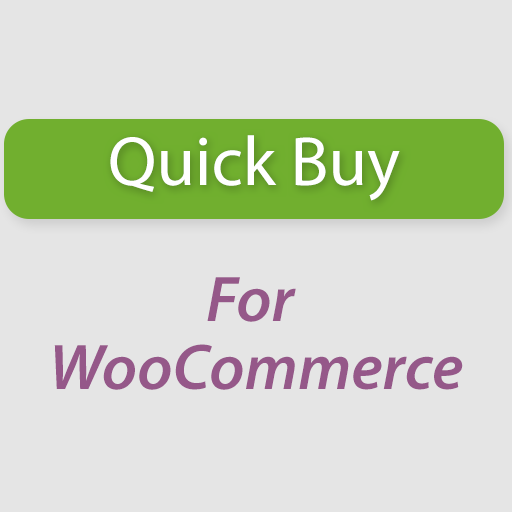
<style>
.page{position:relative;width:512px;height:512px;background:#e5e5e5}
.page>*{position:absolute;margin:0}
.t1{font:70px "MyriadPro-Regular";color:#ffffff}
.t2{font:65px/34px "MyriadPro-SemiboldIt";color:#ffffff}
</style>
<div class="page">
<p class="t1" style="left:110px;top:135px;width:290px;height:66px">Quick Buy</p>
<p class="t2" style="left:54px;top:277px;width:409px;height:113px;text-align:center">For <br><br>WooCommerce</p>
</div>
